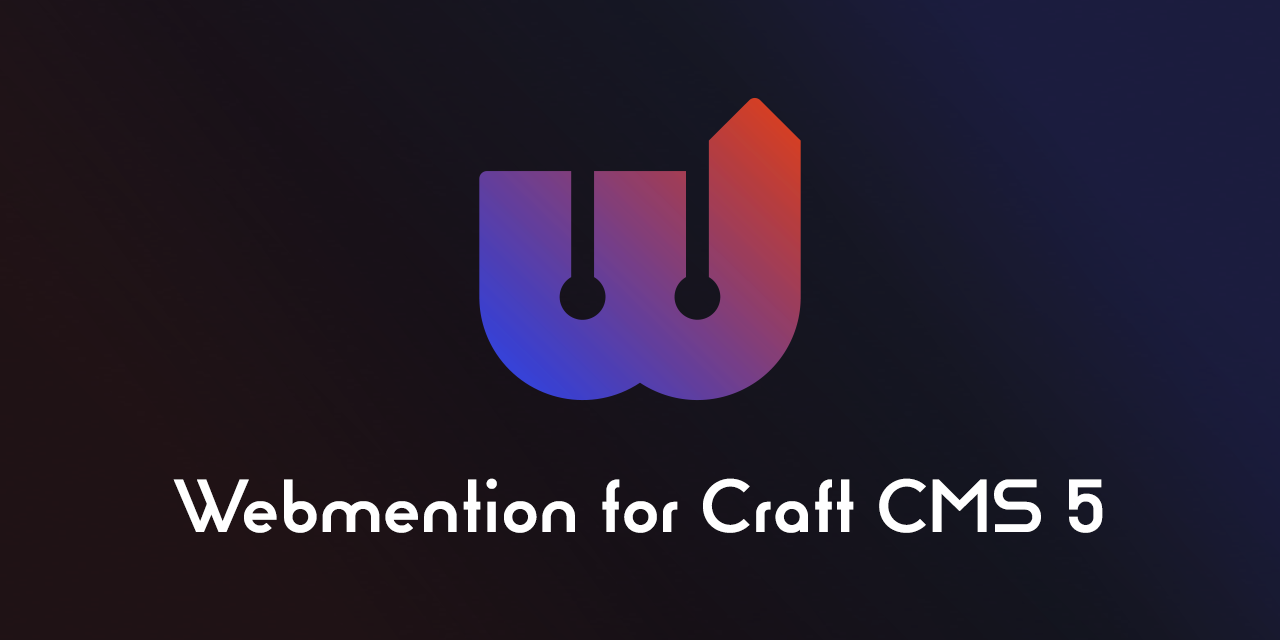
<style>
.page{position:relative;width:1280px;height:640px}
.page>*{position:absolute;margin:0}
.t1{font:72px "Reross-Quadratic";color:#ffffff}
</style>
<div class="page">
<p class="t1" style="left:173px;top:478px;width:930px;height:55px">Webmention for Craft CMS 5</p>
</div>
